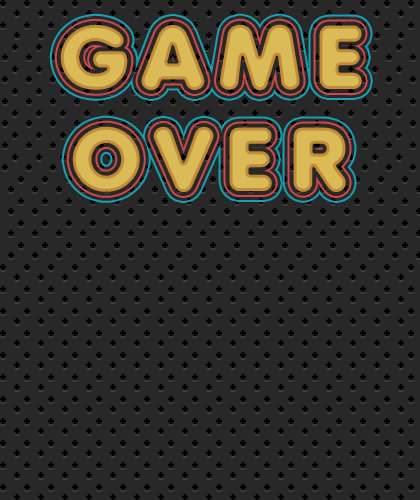
<style>
.page{position:relative;width:420px;height:500px;background:#282828}
.page>*{position:absolute;margin:0}
.t1{font:90px "Anja-Eliane-Nornal";letter-spacing:0.15em;color:#dbbb57;text-transform:uppercase}
</style>
<div class="page">
<p class="t1" style="left:59px;top:23px;width:304px;height:69px">Game</p>
<p class="t1" style="left:71px;top:125px;width:276px;height:68px">over</p>
</div>
